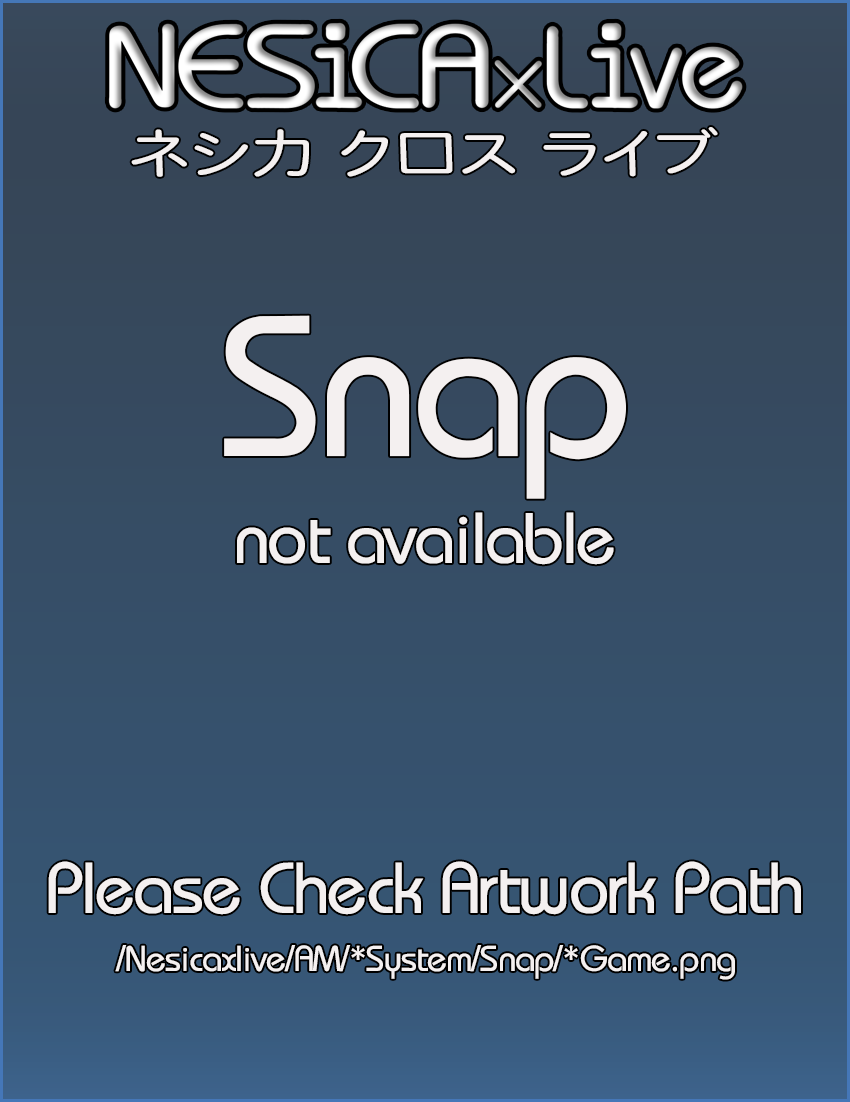
<style>
.page{position:relative;width:850px;height:1102px}
.page>*{position:absolute;margin:0}
.t1{font:52px "HeiseiMaruGoStd-W4";letter-spacing:-0.025em;color:#ffffff;scale:1.27 1}
.t2{font:200px "Bauhaus";letter-spacing:-0.025em;color:#ffffff}
.t3{font:72px "Bauhaus";letter-spacing:-0.025em;color:#ffffff}
.t4{font:36px "Bauhaus";letter-spacing:-0.025em;color:#ffffff}
</style>
<div class="page">
<p class="t1" style="left:131px;top:127px;width:587px;height:50px">ネシ力 ク口ス ライブ</p>
<p class="t2" style="left:224px;top:315px;width:402px;height:184px">Snap</p>
<p class="t3" style="left:237px;top:512px;width:377px;height:53px">not available</p>
<p class="t3" style="left:48px;top:861px;width:753px;height:54px">Please Check Artwork Path</p>
<p class="t4" style="left:115px;top:945px;width:620px;height:35px">/Nesicaxlive/AM/*System/Snap/*Game.png</p>
</div>
